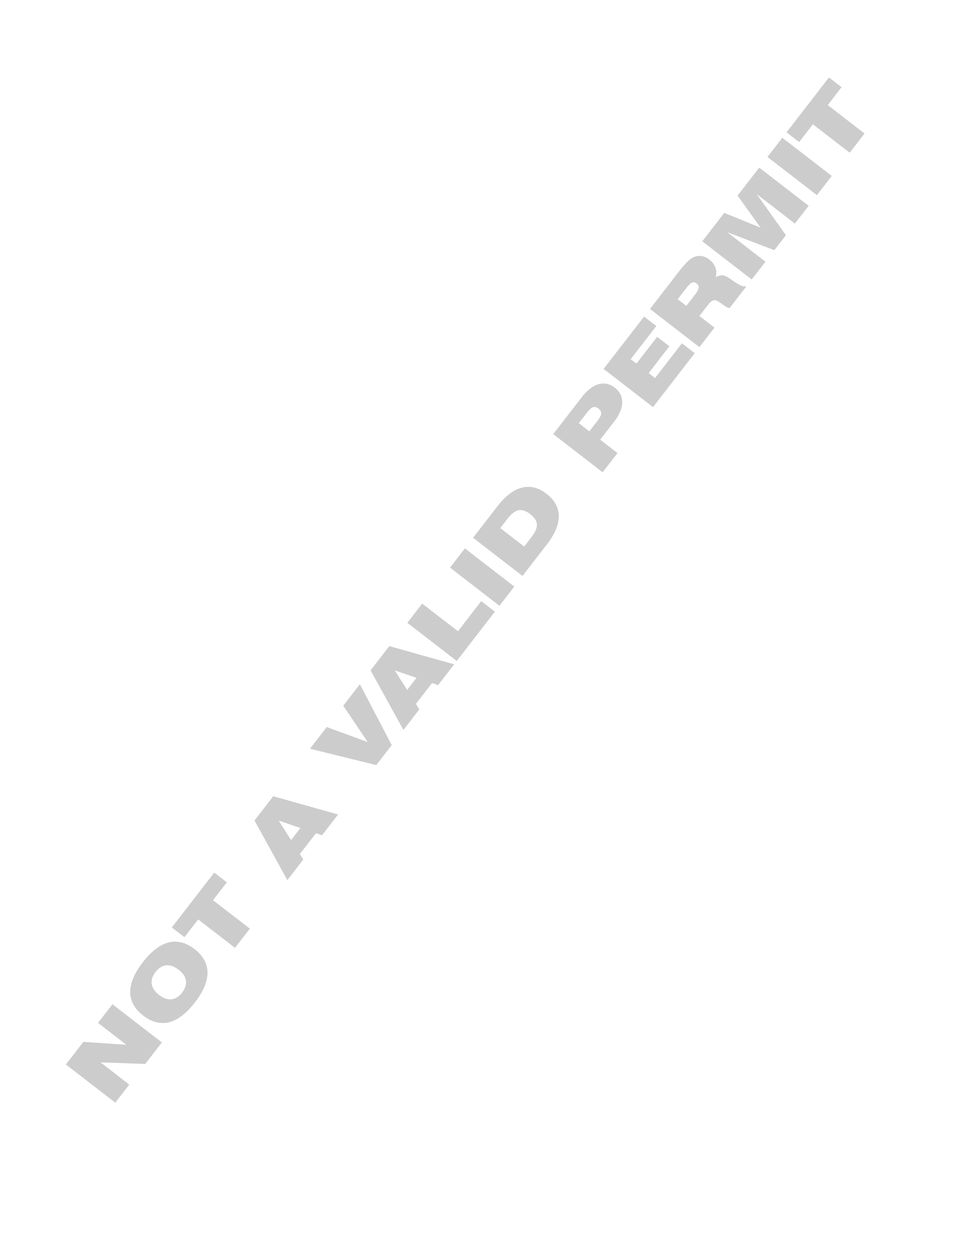
<style>
.page{position:relative;width:960px;height:1242px;background:#ffffff}
.page>*{position:absolute;margin:0}
.t1{font:86.3px "Swiss721BT-BlackExtended";color:#cccccc}
</style>
<div class="page">
<p class="t1" style="left:66px;top:78px;width:799px;height:1025px;rotate:-52deg">NOT A VALID PERMIT</p>
</div>
